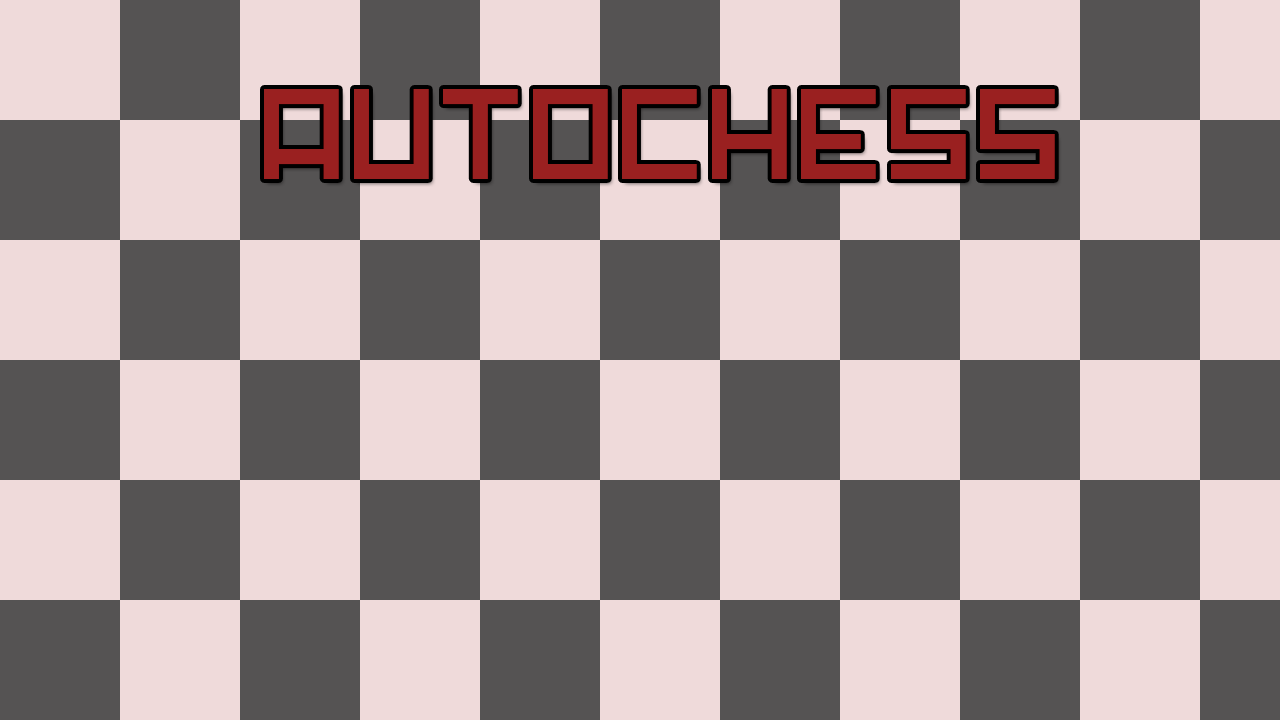
<style>
.page{position:relative;width:1280px;height:720px;background:#efdada}
.page>*{position:absolute;margin:0}
.t1{font:120px "Pixel-Art";color:#9a2020}
</style>
<div class="page">
<p class="t1" style="left:264px;top:89px;width:791px;height:90px">AUTOCHESS</p>
</div>
